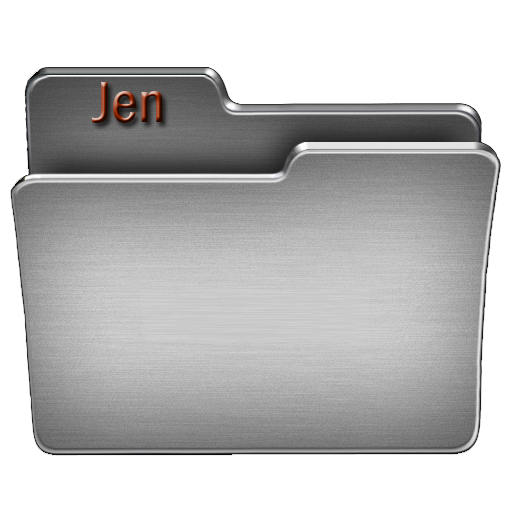
<style>
.page{position:relative;width:512px;height:512px;background:#ffffff}
.page>*{position:absolute;margin:0}
.t1{font:60px "FranklinGothic-MediumCond"}
</style>
<div class="page">
<p class="t1" style="left:92px;top:82px;width:71px;height:41px">Jen</p>
</div>
